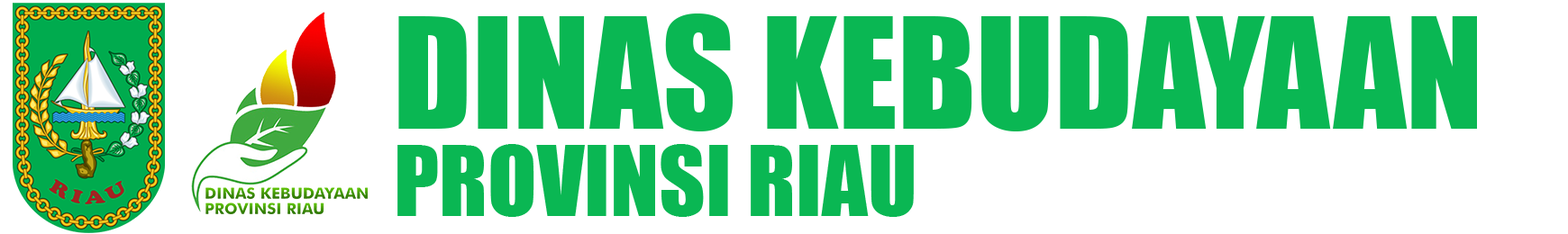
<style>
.page{position:relative;width:1568px;height:234px;background:#ffffff}
.page>*{position:absolute;margin:0}
.t1{font:142.7px "Impact";color:#0ab753}
.t2{font:90.1px "Impact";color:#0ab753}
</style>
<div class="page">
<p class="t1" style="left:398px;top:14px;width:1079px;height:118px">DINAS KEBUDAYAAN</p>
<p class="t2" style="left:397px;top:144px;width:517px;height:73px">PROVINSI RIAU</p>
</div>
